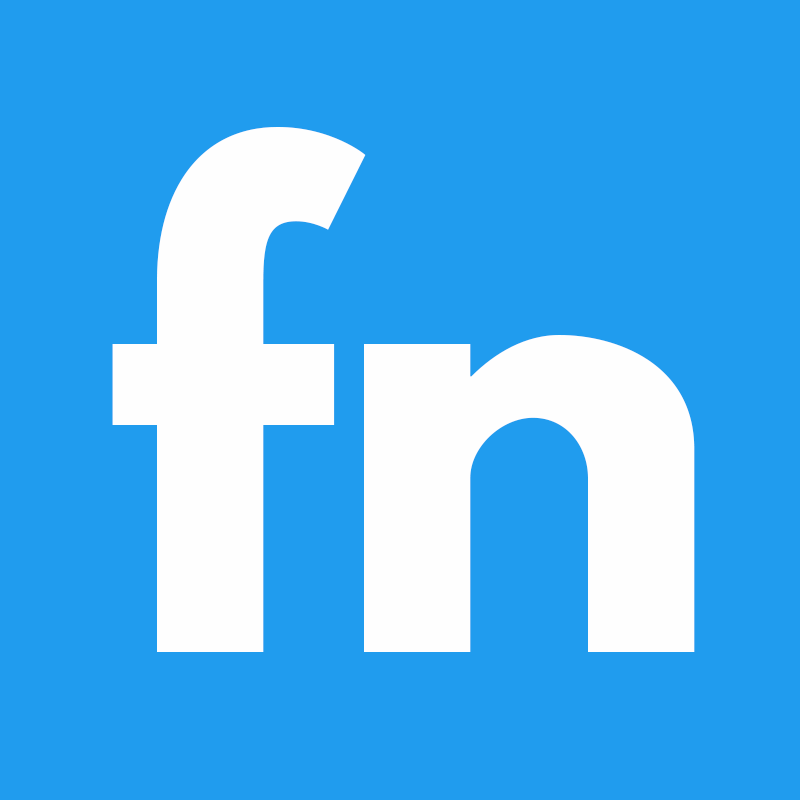
<style>
.page{position:relative;width:800px;height:800px;background:#209cee}
.page>*{position:absolute;margin:0}
.t1{font:600px "LeagueSpartan-Bold";color:#fefefe}
</style>
<div class="page">
<p class="t1" style="left:112px;top:127px;width:583px;height:525px">fn</p>
</div>
